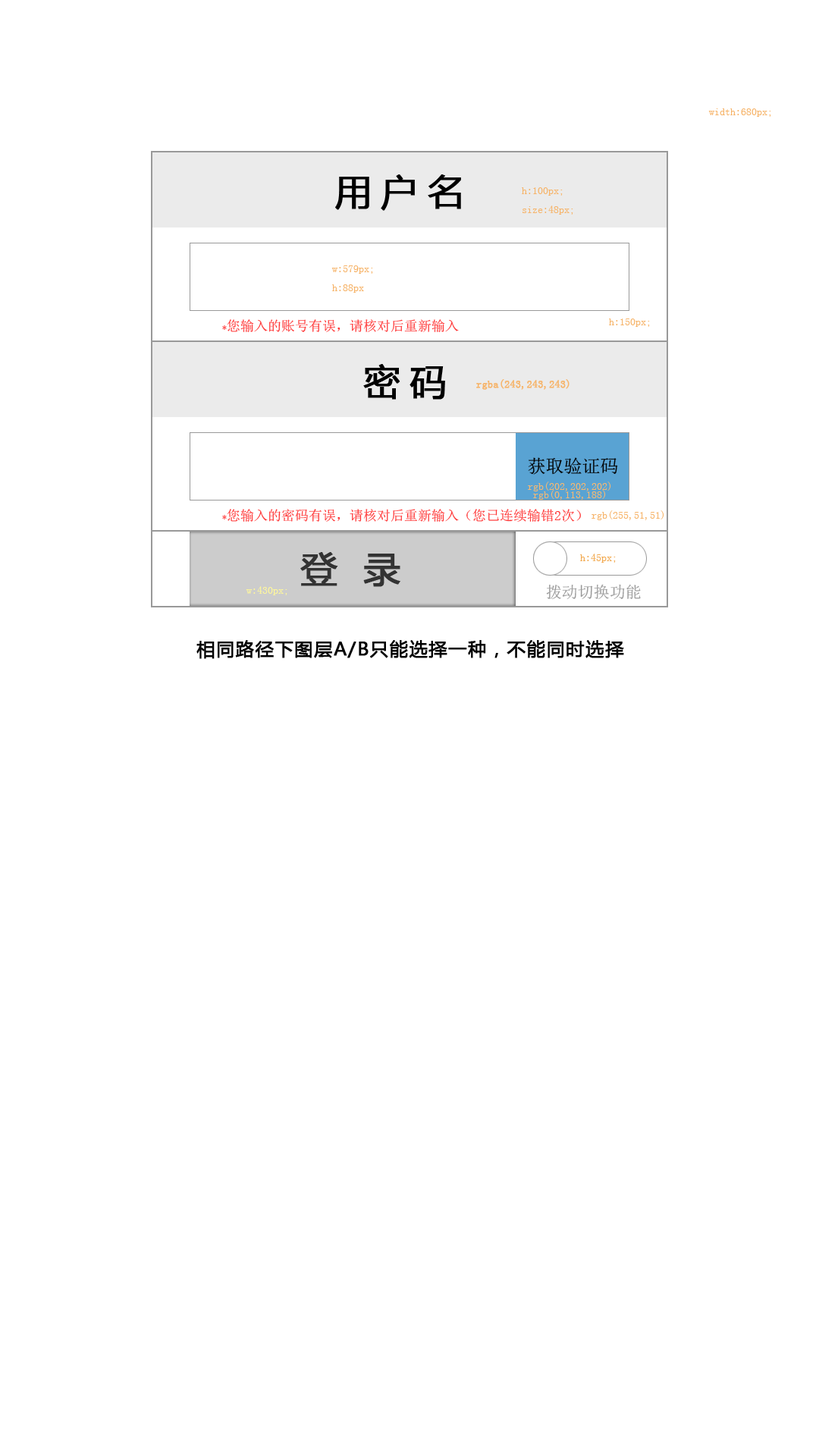
<style>
.page{position:relative;width:819px;height:1456px;background:#ffffff}
.page>*{position:absolute;margin:0}
.t1{font:10.6px "SimSun";color:#f6b46a}
.t2{font:36.4px "MicrosoftYaHei";letter-spacing:0.25em;color:#000000;font-weight:bold}
.t3{font:13.6px "SimSun";color:#ff3333}
.t4{font:9.1px "SimSun";color:#ff3333}
.t5{font:10.6px "SimSun";color:#f6b46a;font-weight:bold}
.t6{font:18.2px "SimSun";color:#000000}
.t7{font:10.6px "SimSun";color:#f5b873}
.t8{font:36.4px "MicrosoftYaHei";letter-spacing:0.7em;color:#333333;font-weight:bold}
.t9{font:10.6px "SimSun";color:#f2a94f}
.t10{font:10.6px "SimSun";color:#fef79b}
.t11{font:15.9px "SimSun";color:#999999}
.t12{font:18.2px "MicrosoftYaHei";letter-spacing:0.05em;color:#000000;font-weight:bold}
</style>
<div class="page">
<p class="t1" style="left:708px;top:108px;width:63px;height:9px">width:680px;</p>
<p class="t2" style="left:335px;top:174px;width:126px;height:37px">用户名</p>
<p class="t1" style="left:522px;top:187px;width:51px;height:28px">h:100px;<br>size:48px;</p>
<p class="t1" style="left:331px;top:265px;width:42px;height:28px">w:579px;<br>h:88px</p>
<p class="t3" style="left:222px;top:319px;width:237px;height:13px"><span class="t4">*</span>您输入的账号有误，请核对后重新输入</p>
<p class="t1" style="left:609px;top:318px;width:41px;height:9px">h:150px;</p>
<p class="t2" style="left:363px;top:364px;width:82px;height:36px">密码</p>
<p class="t5" style="left:476px;top:379px;width:94px;height:11px">rgba(243,243,243)</p>
<p class="t6" style="left:528px;top:457px;width:90px;height:18px">获取验证码</p>
<p class="t7" style="left:528px;top:482px;width:83px;height:9px">rgb(202,202,202)</p>
<p class="t7" style="left:533px;top:490px;width:73px;height:10px">rgb(0,113,188)</p>
<p class="t3" style="left:222px;top:509px;width:359px;height:13px"><span class="t4">*</span>您输入的密码有误，请核对后重新输入（您已连续输错2次）</p>
<p class="t1" style="left:591px;top:510px;width:73px;height:10px">rgb(255,51,51)</p>
<p class="t8" style="left:300px;top:552px;width:100px;height:35px">登录</p>
<p class="t9" style="left:580px;top:554px;width:36px;height:9px">h:45px;</p>
<p class="t10" style="left:246px;top:586px;width:41px;height:9px">w:430px;</p>
<p class="t11" style="left:546px;top:584px;width:95px;height:16px">拨动切换功能</p>
<p class="t12" style="left:196px;top:640px;width:428px;height:19px">相同路径下图层A/B只能选择一种，不能同时选择</p>
</div>
